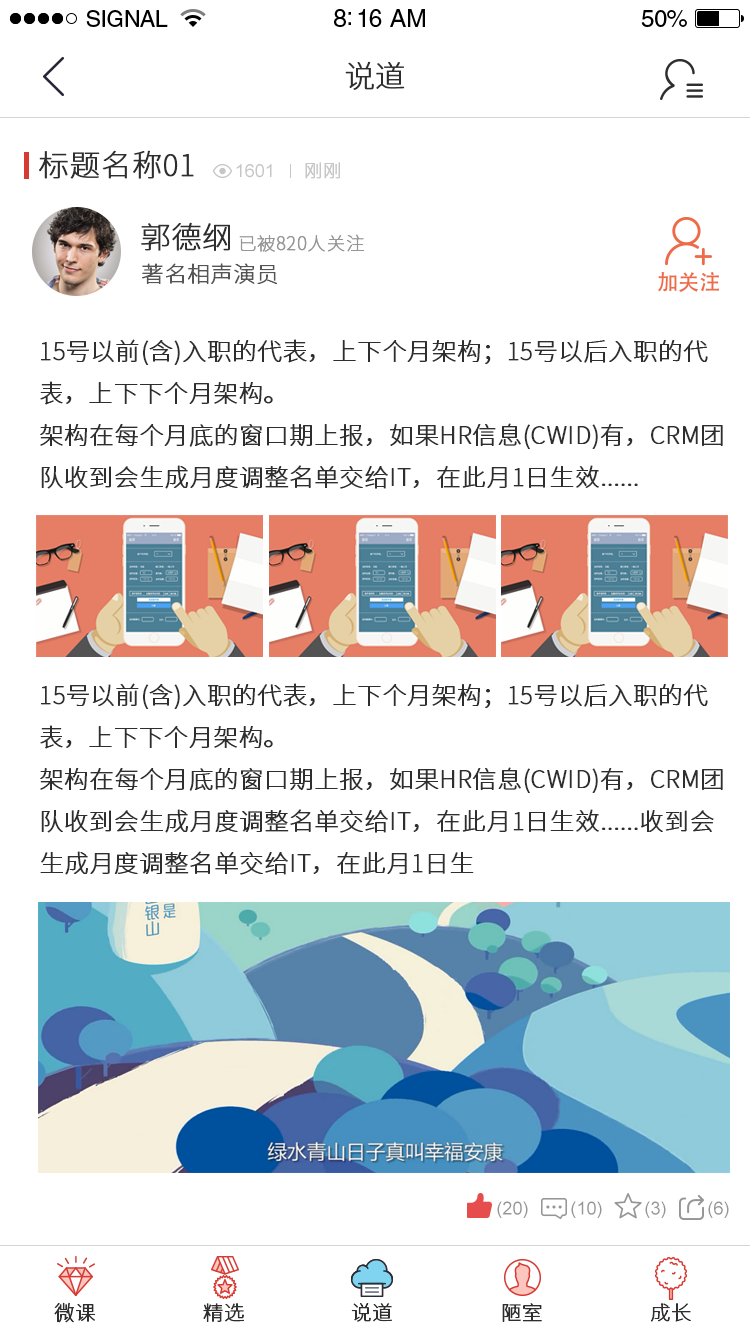
<style>
.page{position:relative;width:750px;height:1334px;background:#ffffff}
.page>*{position:absolute;margin:0}
.t1{font:23px "HelveticaLTStd-Roman";letter-spacing:-0.02em;color:#000000}
.t2{font:25px "HelveticaLTStd-Roman";letter-spacing:-0.02em;color:#000000}
.t3{font:24px "HelveticaLTStd-Roman";letter-spacing:-0.02em;color:#000000}
.t4{font:30px "SourceHanSansCN-ExtraLight";color:#2e2e2e;font-weight:bold}
.t5{font:18px "ArialMT";color:#c6c6c6}
.t6{font:18px "SourceHanSansCN-ExtraLight";color:#c6c6c6;font-weight:bold}
.t7{font:18px "SourceHanSansCN-ExtraLight";color:#969696;font-weight:bold}
.t8{font:22px "SourceHanSansCN-ExtraLight";color:#555555;font-weight:bold}
.t9{font:24px "SourceHanSansCN-ExtraLight";color:#2e2e2e;font-weight:bold}
.t10{font:18px "ArialMT";color:#969696}
.t11{font:20px "SourceHanSansCN-ExtraLight";color:#2e2e2e;font-weight:bold}
</style>
<div class="page">
<p class="t1" style="left:86px;top:10px;width:82px;height:17px">SIGNAL</p>
<p class="t2" style="left:334px;top:9px;width:91px;height:18px">8:16 AM</p>
<p class="t3" style="left:641px;top:10px;width:46px;height:17px">50%</p>
<p class="t4" style="left:345px;top:61px;width:60px;height:29px">说道</p>
<p class="t4" style="left:38px;top:150px;width:156px;height:29px">标题名称01</p>
<p class="t5" style="left:236px;top:164px;width:36px;height:14px">1601</p>
<p class="t6" style="left:305px;top:162px;width:35px;height:17px">刚刚</p>
<p class="t4" style="left:141px;top:222px;width:89px;height:29px">郭德纲</p>
<p class="t7" style="left:239px;top:234px;width:125px;height:18px">已被820人关注</p>
<p class="t8" style="left:142px;top:263px;width:135px;height:22px">著名相声演员</p>
<p class="t9" style="left:40px;top:339px;width:683px;height:150px">15号以前(含)入职的代表，上下个月架构；15号以后入职的代表，上下下个月架构。<br>架构在每个月底的窗口期上报，如果HR信息(CWID)有，CRM团队收到会生成月度调整名单交给IT，在此月1日生效......</p>
<p class="t9" style="left:40px;top:683px;width:683px;height:192px">15号以前(含)入职的代表，上下个月架构；15号以后入职的代表，上下下个月架构。<br>架构在每个月底的窗口期上报，如果HR信息(CWID)有，CRM团队收到会生成月度调整名单交给IT，在此月1日生效......收到会生成月度调整名单交给IT，在此月1日生</p>
<p class="t10" style="left:497px;top:1201px;width:31px;height:17px">(20)</p>
<p class="t10" style="left:571px;top:1201px;width:31px;height:17px">(10)</p>
<p class="t10" style="left:645px;top:1201px;width:21px;height:17px">(3)</p>
<p class="t10" style="left:708px;top:1201px;width:21px;height:17px">(6)</p>
<p class="t11" style="left:54px;top:1302px;width:41px;height:21px">微课</p>
<p class="t11" style="left:203px;top:1303px;width:41px;height:19px">精选</p>
<p class="t11" style="left:351px;top:1303px;width:41px;height:19px">说道</p>
<p class="t11" style="left:502px;top:1303px;width:40px;height:19px">陋室</p>
<p class="t11" style="left:650px;top:1303px;width:41px;height:19px">成长</p>
</div>
